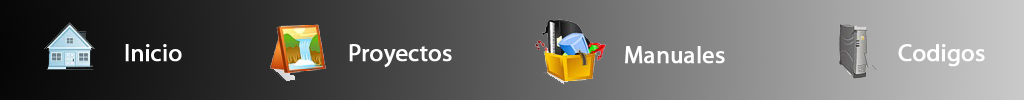
<style>
.page{position:relative;width:1024px;height:100px}
.page>*{position:absolute;margin:0}
.t1{font:24px "MyriadPro-Regular";color:#ffffff;font-weight:bold}
</style>
<div class="page">
<p class="t1" style="left:125px;top:44px;width:57px;height:18px">Inicio</p>
<p class="t1" style="left:349px;top:44px;width:103px;height:24px">Proyectos</p>
<p class="t1" style="left:625px;top:46px;width:100px;height:18px">Manuales</p>
<p class="t1" style="left:898px;top:44px;width:87px;height:23px">Codigos</p>
</div>
